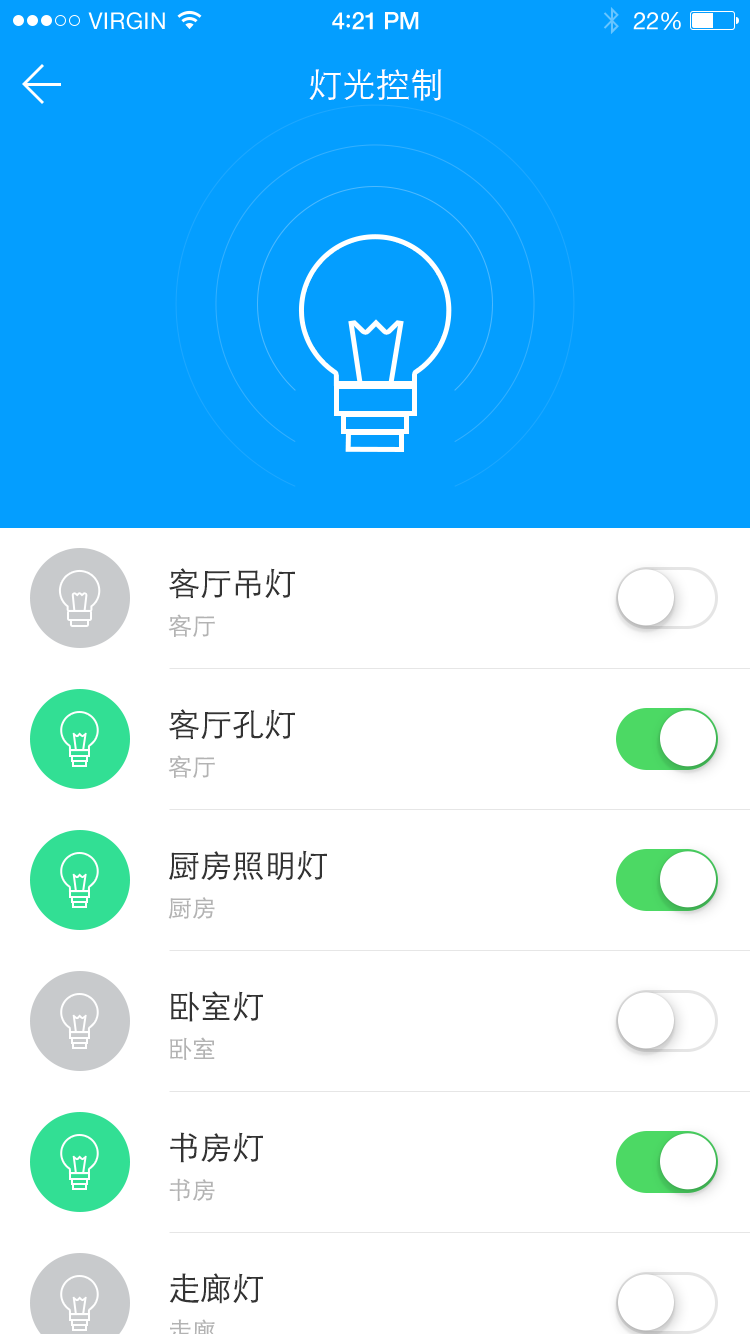
<style>
.page{position:relative;width:750px;height:1334px;background:#ffffff}
.page>*{position:absolute;margin:0}
.t1{font:34px "STXihei";color:#ffffff}
.t2{font:32px/141px "STXihei";color:#333333}
</style>
<div class="page">
<p class="t1" style="left:309px;top:69px;width:133px;height:32px">灯光控制</p>
<p class="t2" style="left:169px;top:568px;width:158px;height:736px">客厅吊灯<br>客厅孔灯<br>厨房照明灯<br>卧室灯<br>书房灯<br>走廊灯</p>
</div>
